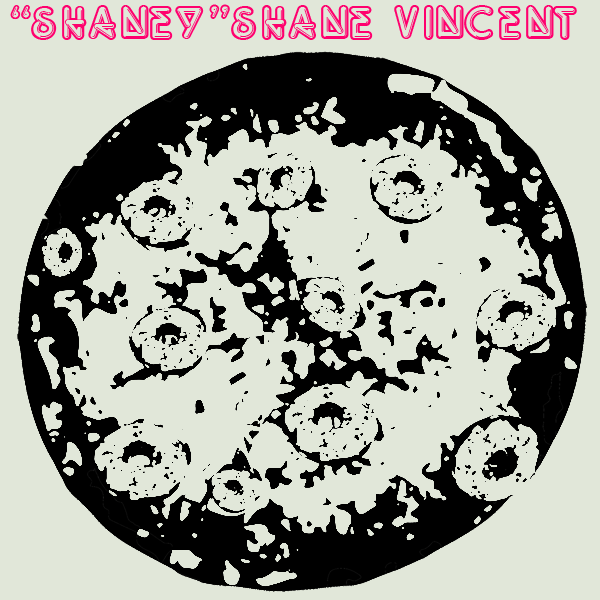
<style>
.page{position:relative;width:600px;height:600px;background:#e1e7d9}
.page>*{position:absolute;margin:0}
.t1{font:50px "NeonLights-";color:#ff006e}
</style>
<div class="page">
<p class="t1" style="left:10px;top:4px;width:567px;height:36px">“SHANEY”SHANE VINCENT</p>
</div>
